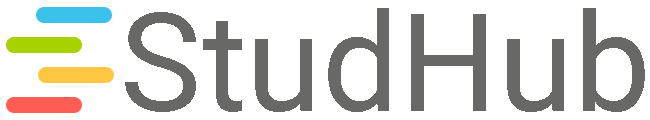
<style>
.page{position:relative;width:650px;height:120px;background:#ffffff}
.page>*{position:absolute;margin:0}
.t1{font:137.5px "Roboto-Regular";color:#686866}
</style>
<div class="page">
<p class="t1" style="left:125px;top:8px;width:520px;height:104px">StudHub</p>
</div>
